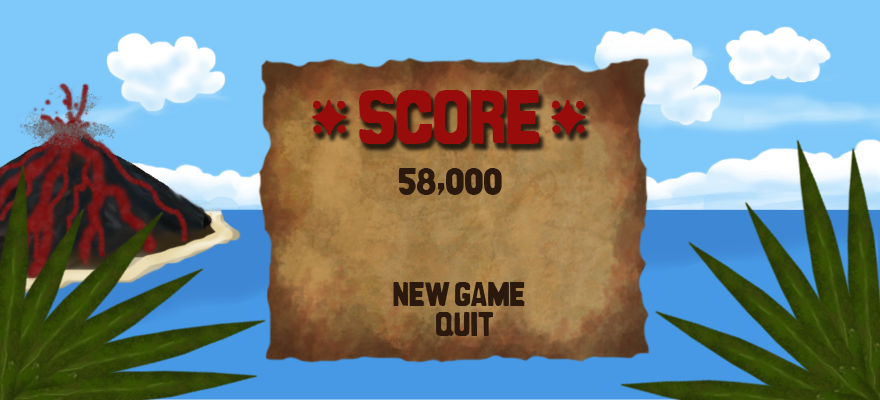
<style>
.page{position:relative;width:880px;height:400px}
.page>*{position:absolute;margin:0}
.t1{font:67px "CanCandeBois";color:#990c0c}
.t2{font:34px "CanCandeBois";color:#2b190e}
.t3{font:30px "CanCandeBois";color:#2b190e}
</style>
<div class="page">
<p class="t1" style="left:312px;top:90px;width:274px;height:54px">A score A</p>
<p class="t2" style="left:398px;top:168px;width:104px;height:27px">58,000</p>
<p class="t3" style="left:393px;top:282px;width:132px;height:24px">new game</p>
<p class="t3" style="left:436px;top:312px;width:57px;height:24px">quit</p>
</div>
